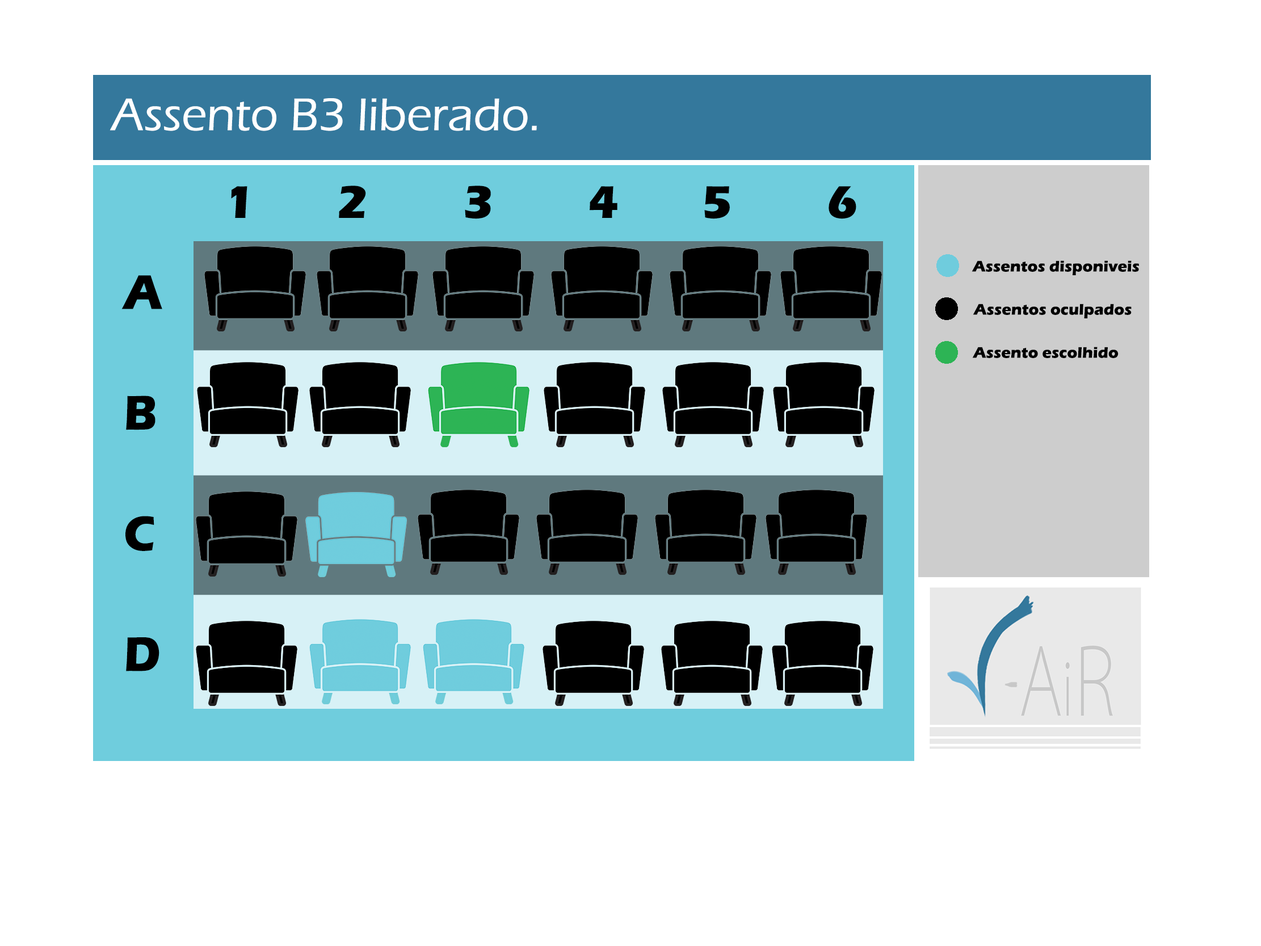
<style>
.page{position:relative;width:1261px;height:946px;background:#ffffff}
.page>*{position:absolute;margin:0}
.t1{font:47.3px "ErasITC-Medium";color:#ffffff}
.t2{font:47.3px "ErasITC-Bold";color:#010101}
.t3{font:15.8px "ErasITC-Bold";color:#000000}
.t4{font:50.3px "ErasITC-Bold";color:#000000;scale:0.94 1}
</style>
<div class="page">
<p class="t1" style="left:110px;top:98px;width:427px;height:33px">Assento B3 liberado.</p>
<p class="t2" style="left:231px;top:186px;width:625px;height:33px">1       2        3        4       5        6</p>
<p class="t3" style="left:971px;top:260px;width:168px;height:15px">Assentos disponiveis</p>
<p class="t4" style="left:121px;top:275px;width:41px;height:396px">A<br><br>B<br><br>C<br><br>D</p>
<p class="t3" style="left:972px;top:304px;width:159px;height:14px">Assentos oculpados</p>
<p class="t3" style="left:972px;top:347px;width:146px;height:11px">Assento escolhido</p>
</div>
